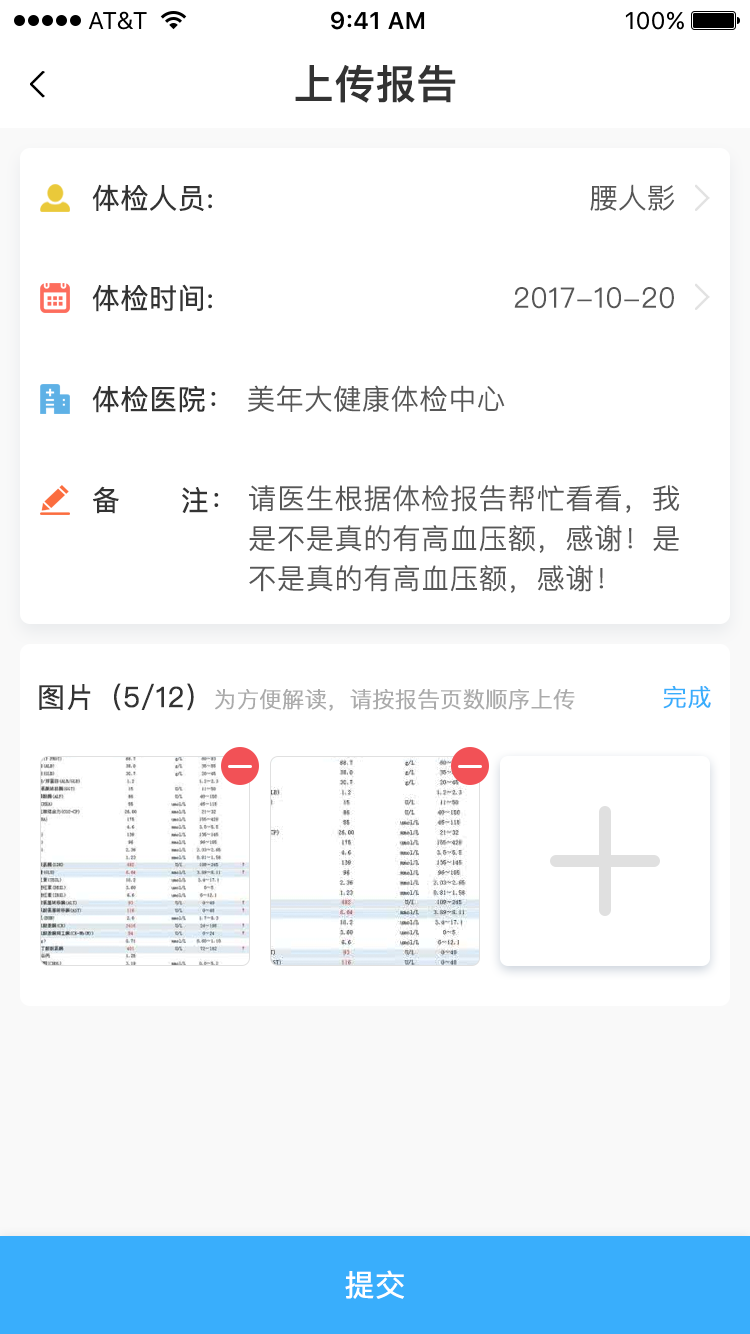
<style>
.page{position:relative;width:750px;height:1334px;background:#ffffff}
.page>*{position:absolute;margin:0}
.t1{font:40px "PingFangSC-Medium";color:#333333;font-weight:bold}
.t2{font:28px "PingFangSC-Regular";color:#333333;font-weight:bold}
.t3{font:28px "PingFangSC-Light";color:#575757;font-weight:bold}
.t4{font:28px/40px "PingFangSC-Light";color:#575757;font-weight:bold}
.t5{font:22px "PingFangSC-Light";color:#ababab;font-weight:bold}
.t6{font:24px "PingFangSC-Light";color:#39aefc;font-weight:bold}
.t7{font:30px "PingFangSC-Regular";color:#ffffff;font-weight:bold}
</style>
<div class="page">
<p class="t1" style="left:295px;top:64px;width:161px;height:39px">上传报告</p>
<p class="t2" style="left:92px;top:184px;width:120px;height:27px">体检人员:</p>
<p class="t3" style="left:590px;top:184px;width:85px;height:27px">腰人影</p>
<p class="t2" style="left:92px;top:284px;width:120px;height:28px">体检时间:</p>
<p class="t3" style="left:514px;top:287px;width:160px;height:22px">2017-10-20</p>
<p class="t2" style="left:92px;top:386px;width:124px;height:27px">体检医院：</p>
<p class="t3" style="left:248px;top:385px;width:257px;height:27px">美年大健康体检中心</p>
<p class="t2" style="left:93px;top:486px;width:126px;height:28px">备      注：</p>
<p class="t4" style="left:249px;top:485px;width:431px;height:108px">请医生根据体检报告帮忙看看，我是不是真的有高血压额，感谢！是不是真的有高血压额，感谢！</p>
<p class="t5" style="left:39px;top:683px;width:536px;height:28px"><span class="t2">图片（5/12）</span>为方便解读，请按报告页数顺序上传</p>
<p class="t6" style="left:663px;top:686px;width:48px;height:23px">完成</p>
<p class="t7" style="left:345px;top:1270px;width:59px;height:29px">提交</p>
</div>
